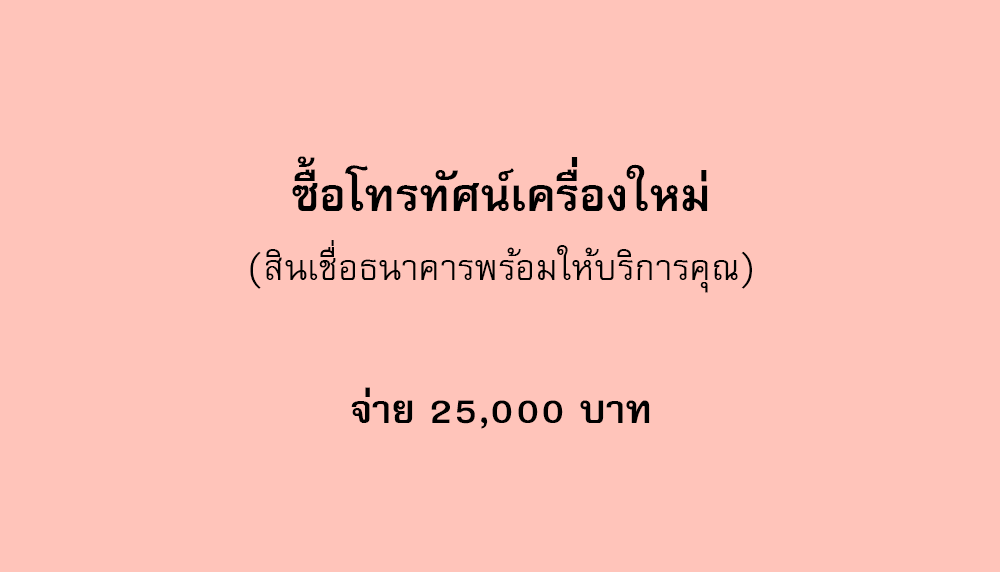
<style>
.page{position:relative;width:1000px;height:572px;background:#ffc4ba}
.page>*{position:absolute;margin:0}
.t1{font:64px "FreesiaUPCBold";color:#000000}
.t2{font:50px "FreesiaUPC";color:#000000}
.t3{font:56px "FreesiaUPCBold";color:#000000}
</style>
<div class="page">
<p class="t1" style="left:292px;top:156px;width:416px;height:55px">ซื้อโทรทัศน์เครื่องใหม่</p>
<p class="t2" style="left:250px;top:240px;width:502px;height:53px">(สินเชื่อธนาคารพร้อมให้บริการคุณ)</p>
<p class="t3" style="left:351px;top:387px;width:299px;height:42px">จ่าย 25,000 บาท</p>
</div>
